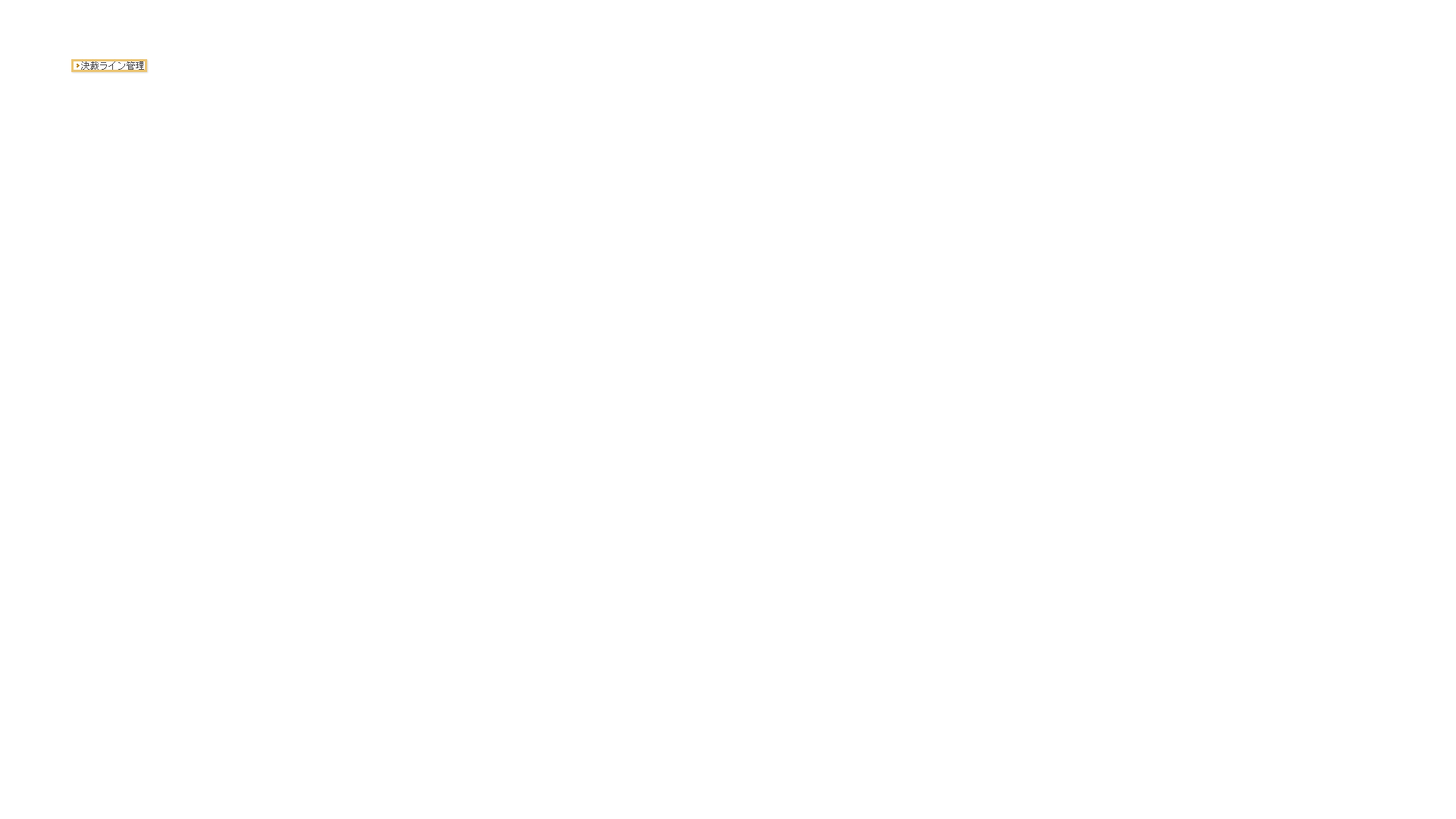
<style>
.page{position:relative;width:1456px;height:819px;background:#ffffff}
.page>*{position:absolute;margin:0}
.t1{font:9.1px "MS-Gothic";color:#494747}
</style>
<div class="page">
<p class="t1" style="left:81px;top:61px;width:63px;height:9px">決裁ライン管理</p>
</div>
